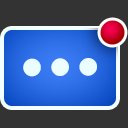
<style>
.page{position:relative;width:128px;height:128px;background:#333333}
.page>*{position:absolute;margin:0}
.t1{font:85.1px "STHupo";color:#f3ffff}
</style>
<div class="page">
<p class="t1" style="left:23px;top:58px;width:74px;height:19px;rotate:-1deg">…</p>
</div>
